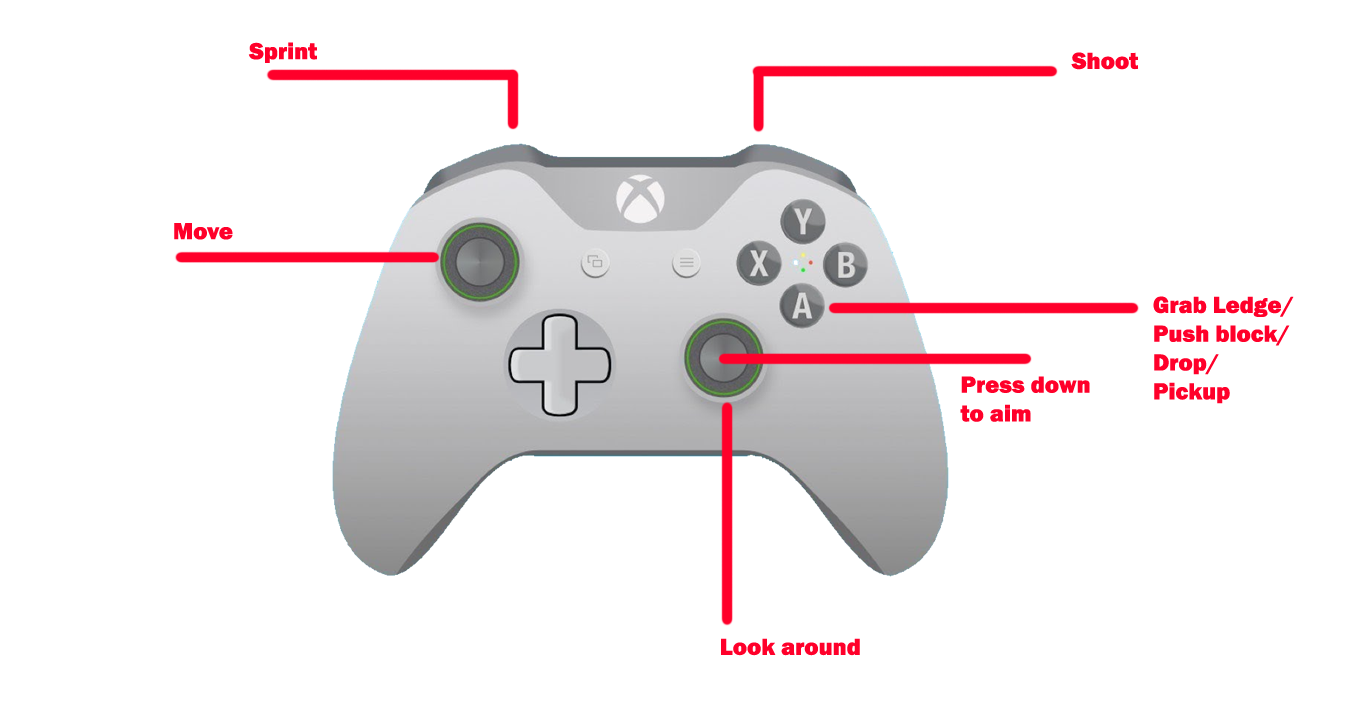
<style>
.page{position:relative;width:1355px;height:720px;background:#ffffff}
.page>*{position:absolute;margin:0}
.t1{font:24px "FranklinGothic-Heavy";color:#ff002a}
</style>
<div class="page">
<p class="t1" style="left:248px;top:42px;width:69px;height:21px">Sprint</p>
<p class="t1" style="left:1071px;top:52px;width:67px;height:18px">Shoot</p>
<p class="t1" style="left:174px;top:223px;width:59px;height:17px">Move</p>
<p class="t1" style="left:1153px;top:296px;width:141px;height:108px">Grab Ledge/<br>Push block/<br>Drop/<br>Pickup</p>
<p class="t1" style="left:960px;top:376px;width:130px;height:46px">Press down<br>to aim</p>
<p class="t1" style="left:721px;top:638px;width:139px;height:18px">Look around</p>
</div>
